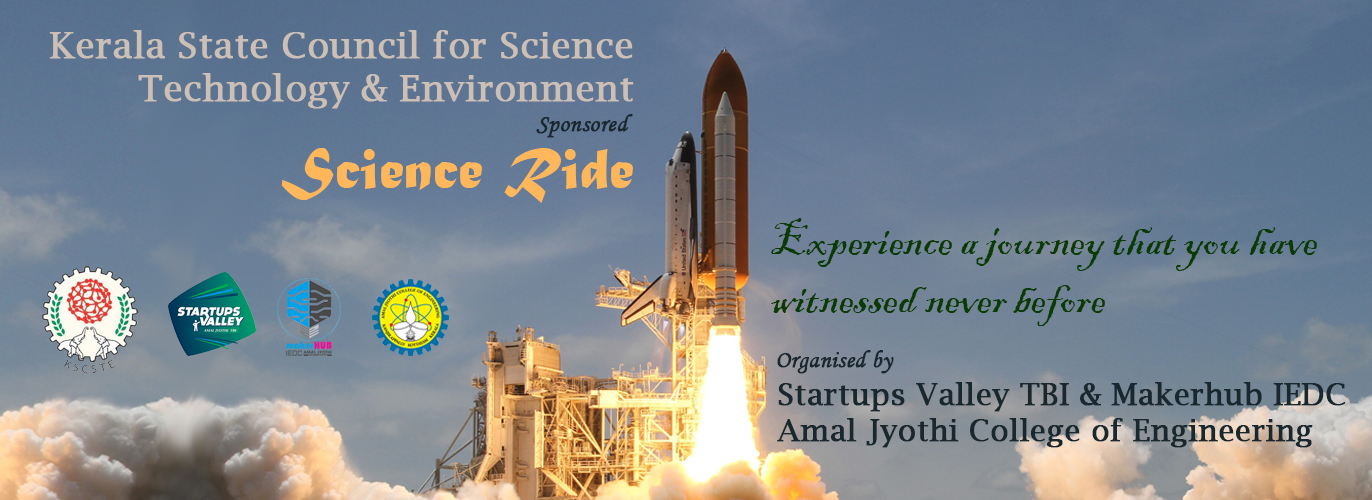
<style>
.page{position:relative;width:1372px;height:500px}
.page>*{position:absolute;margin:0}
.t1{font:36px "LucidaBright";color:#ccbfb6;font-weight:bold}
.t2{font:24px "MonotypeCorsiva";color:#19282e;font-weight:bold}
.t3{font:30px "LucidaBright";color:#19282e;font-weight:bold}
</style>
<div class="page">
<p class="t1" style="left:49px;top:30px;width:585px;height:79px;text-align:right">Kerala State Council for Science<br>Technology &amp; Environment</p>
<p class="t2" style="left:536px;top:114px;width:97px;height:24px">Sponsored</p>
<p class="t2" style="left:777px;top:350px;width:117px;height:24px">Organised by</p>
<p class="t3" style="left:777px;top:382px;width:568px;height:66px;text-align:justify">Startups Valley TBI &amp; Makerhub IEDC<br>Amal Jyothi College of Engineering</p>
</div>
